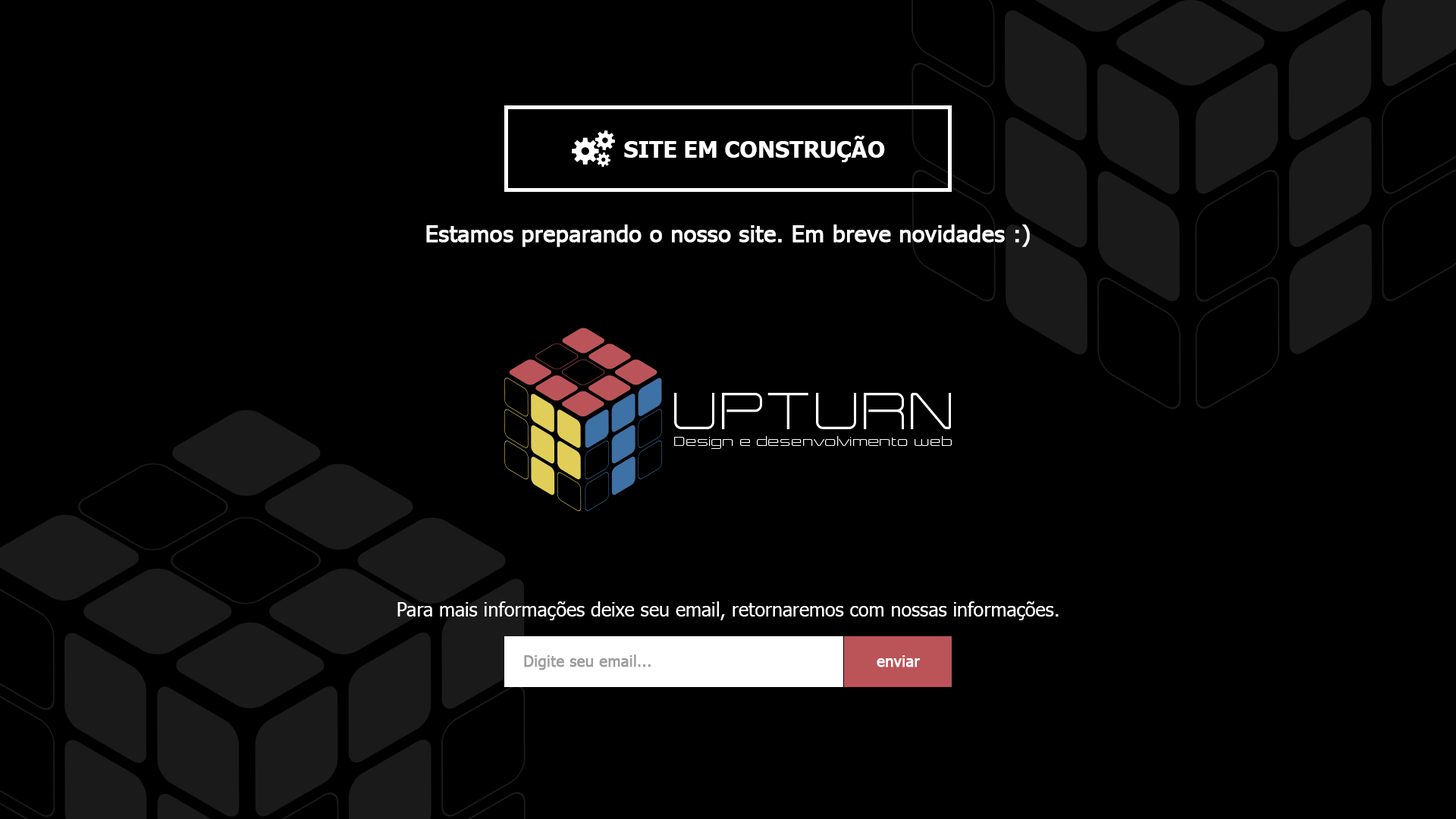
<style>
.page{position:relative;width:1456px;height:819px;background:#000000}
.page>*{position:absolute;margin:0}
.t1{font:22.7px "Tahoma-Bold";color:#ffffff}
.t2{font:22.7px "Tahoma";color:#ffffff;font-weight:bold}
.t3{font:19px "Tahoma";color:#ffffff}
.t4{font:15.2px "Tahoma";color:#9e9e9e;font-weight:bold}
.t5{font:15.2px "Tahoma";color:#ffffff;font-weight:bold}
</style>
<div class="page">
<p class="t1" style="left:624px;top:136px;width:261px;height:26px">SITE EM CONSTRUÇÃO</p>
<p class="t2" style="left:426px;top:224px;width:604px;height:23px">Estamos preparando o nosso site. Em breve novidades :)</p>
<p class="t3" style="left:397px;top:601px;width:662px;height:19px">Para mais informações deixe seu email, retornaremos com nossas informações.</p>
<p class="t4" style="left:524px;top:654px;width:127px;height:16px">Digite seu email...</p>
<p class="t5" style="left:877px;top:655px;width:43px;height:12px">enviar</p>
</div>
